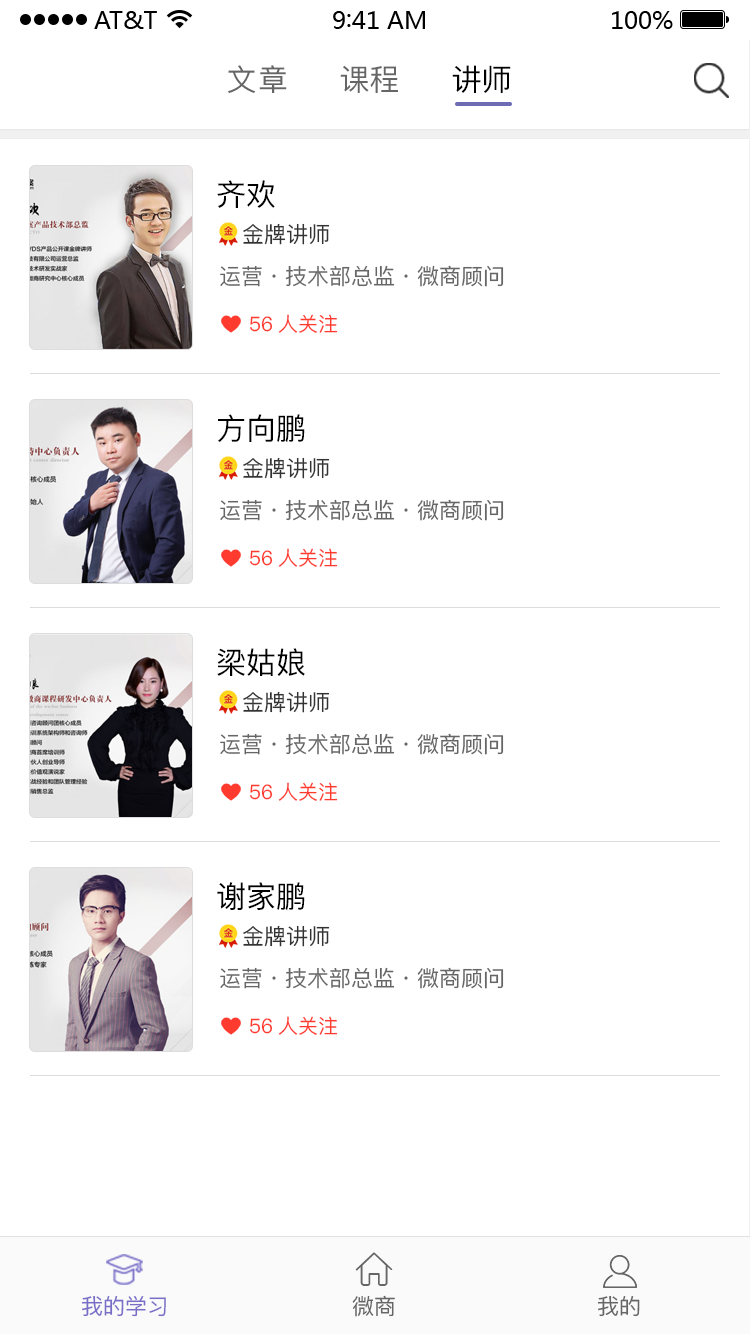
<style>
.page{position:relative;width:750px;height:1334px;background:#ffffff}
.page>*{position:absolute;margin:0}
.t1{font:30px "PingFang-SC-Medium";letter-spacing:0.04em;color:#666666}
.t2{font:30px "PingFang-SC-Medium";color:#666666}
.t3{font:30px "PingFang-SC-Medium";color:#000000}
.t4{font:22px "PingFang-SC-Medium";color:#333333}
.t5{font:22px "PingFang-SC-Medium";color:#666666}
.t6{font:20px "PingFang-SC-Medium";color:#ff3b30}
.t7{font:22px "PingFang-SC-Medium";color:#786ec8}
</style>
<div class="page">
<p class="t1" style="left:228px;top:65px;width:59px;height:28px">文章</p>
<p class="t2" style="left:340px;top:65px;width:58px;height:28px">课程</p>
<p class="t3" style="left:452px;top:65px;width:59px;height:28px">讲师</p>
<p class="t3" style="left:217px;top:180px;width:58px;height:28px">齐欢</p>
<p class="t4" style="left:243px;top:223px;width:87px;height:22px">金牌讲师</p>
<p class="t5" style="left:220px;top:265px;width:284px;height:22px">运营·技术部总监·微商顾问</p>
<p class="t6" style="left:250px;top:314px;width:88px;height:19px">56人关注</p>
<p class="t3" style="left:218px;top:414px;width:87px;height:29px">方向鹏</p>
<p class="t4" style="left:243px;top:457px;width:87px;height:22px">金牌讲师</p>
<p class="t5" style="left:220px;top:499px;width:284px;height:22px">运营·技术部总监·微商顾问</p>
<p class="t6" style="left:250px;top:548px;width:88px;height:19px">56人关注</p>
<p class="t3" style="left:217px;top:648px;width:88px;height:28px">梁姑娘</p>
<p class="t4" style="left:243px;top:691px;width:87px;height:22px">金牌讲师</p>
<p class="t5" style="left:220px;top:733px;width:284px;height:22px">运营·技术部总监·微商顾问</p>
<p class="t6" style="left:250px;top:782px;width:88px;height:19px">56人关注</p>
<p class="t3" style="left:217px;top:882px;width:88px;height:29px">谢家鹏</p>
<p class="t4" style="left:243px;top:925px;width:87px;height:22px">金牌讲师</p>
<p class="t5" style="left:220px;top:967px;width:284px;height:22px">运营·技术部总监·微商顾问</p>
<p class="t6" style="left:250px;top:1016px;width:88px;height:19px">56人关注</p>
<p class="t7" style="left:81px;top:1295px;width:85px;height:22px">我的学习</p>
<p class="t5" style="left:352px;top:1295px;width:43px;height:22px">微商</p>
<p class="t5" style="left:597px;top:1295px;width:43px;height:22px">我的</p>
</div>
